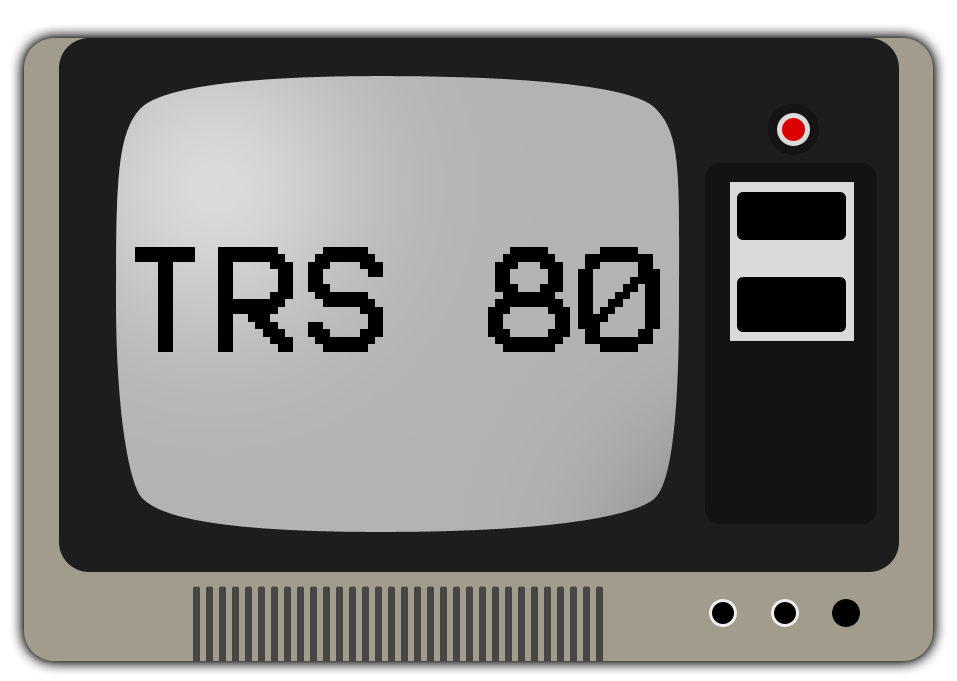
<style>
.page{position:relative;width:957px;height:681px;background:#1d1d1d}
.page>*{position:absolute;margin:0}
.t1{font:120px "Terminal";color:#000000}
</style>
<div class="page">
<p class="t1" style="left:135px;top:247px;width:525px;height:105px">TRS 80</p>
</div>
